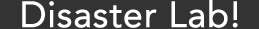
<style>
.page{position:relative;width:259px;height:29px;background:#333333}
.page>*{position:absolute;margin:0}
.t1{font:36px "Avenir-Roman";color:#ffffff;font-weight:bold}
</style>
<div class="page">
<p class="t1" style="left:22px;top:0px;width:216px;height:28px">Disaster Lab!</p>
</div>
